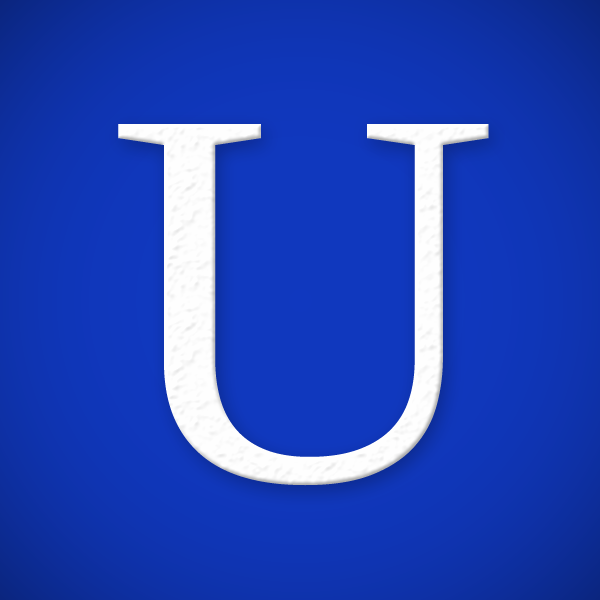
<style>
.page{position:relative;width:600px;height:600px}
.page>*{position:absolute;margin:0}
.t1{font:544.2px "LiberationSerif";color:#fefefe}
</style>
<div class="page">
<p class="t1" style="left:118px;top:124px;width:371px;height:362px">U</p>
</div>
